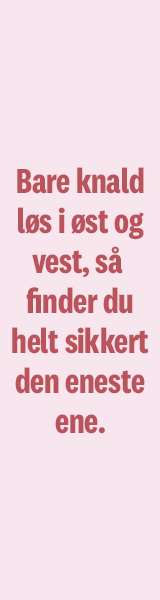
<style>
.page{position:relative;width:160px;height:600px;background:#f8e6ef}
.page>*{position:absolute;margin:0}
.t1{font:36px/40px "National2Condensed-Bold";letter-spacing:-0.008em;color:#bc535a}
</style>
<div class="page">
<p class="t1" style="left:12px;top:167px;width:137px;height:267px;text-align:center">Bare knald<br>løs i øst og<br>vest, så <br>finder du<br>helt sikkert<br>den eneste<br>ene.</p>
</div>
